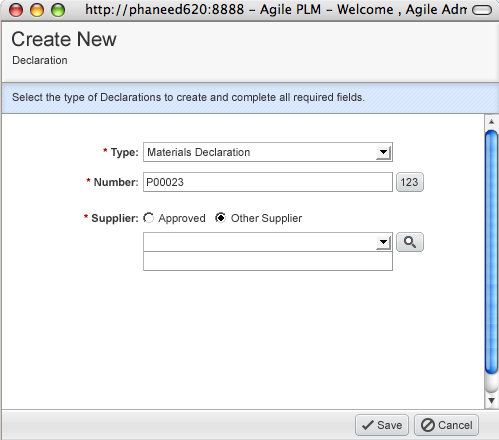
<style>
.page{position:relative;width:499px;height:440px;background:#ffffff}
.page>*{position:absolute;margin:0}
.t1{font:20px "ArialMT";color:#333333}
.t2{font:11px "ArialMT";color:#333333}
.t3{font:11px "Arial-BoldMT";color:#333333}
.t4{font:11px "Arial-BoldMT";color:#666666}
.t5{font:11px "Arial-BoldMT";color:#990000}
.t6{font:11px "ArialMT";color:#666666}
</style>
<div class="page">
<p class="t1" style="left:12px;top:31px;width:105px;height:16px">Create New</p>
<p class="t2" style="left:13px;top:56px;width:54px;height:8px">Declaration</p>
<p class="t2" style="left:12px;top:93px;width:353px;height:11px">Select the type of Declarations to create and complete all required fields.</p>
<p class="t3" style="left:103px;top:148px;width:35px;height:11px"><span class="t4">  </span><span class="t5">* </span>Type:</p>
<p class="t2" style="left:148px;top:148px;width:102px;height:8px">Materials Declaration</p>
<p class="t3" style="left:86px;top:178px;width:52px;height:8px"><span class="t5">*</span> Number<span class="t4">:</span></p>
<p class="t2" style="left:147px;top:178px;width:37px;height:8px">P00023</p>
<p class="t2" style="left:401px;top:178px;width:17px;height:8px">123</p>
<p class="t3" style="left:84px;top:214px;width:54px;height:11px"><span class="t5">*</span> Supplier:</p>
<p class="t2" style="left:158px;top:214px;width:47px;height:11px"><span class="t6"> </span>Approved</p>
<p class="t2" style="left:231px;top:214px;width:72px;height:11px"><span class="t6"> </span>Other Supplier</p>
<p class="t2" style="left:377px;top:421px;width:25px;height:8px">Save</p>
<p class="t2" style="left:438px;top:421px;width:34px;height:8px">Cancel</p>
</div>
